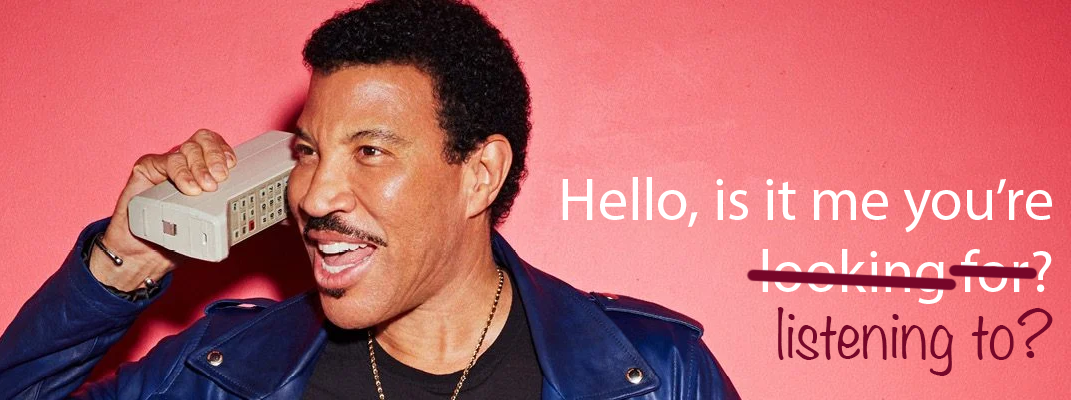
<style>
.page{position:relative;width:1071px;height:400px}
.page>*{position:absolute;margin:0}
.t1{font:60px "MyriadPro-Regular";color:#ffffff}
.t2{font:60px "Noteworthy-Light";color:#770629}
</style>
<div class="page">
<p class="t1" style="left:562px;top:177px;width:490px;height:127px;text-align:right">Hello, is it me you’re<br> looking for?</p>
<p class="t2" style="left:777px;top:307px;width:276px;height:69px">listening to?</p>
</div>
